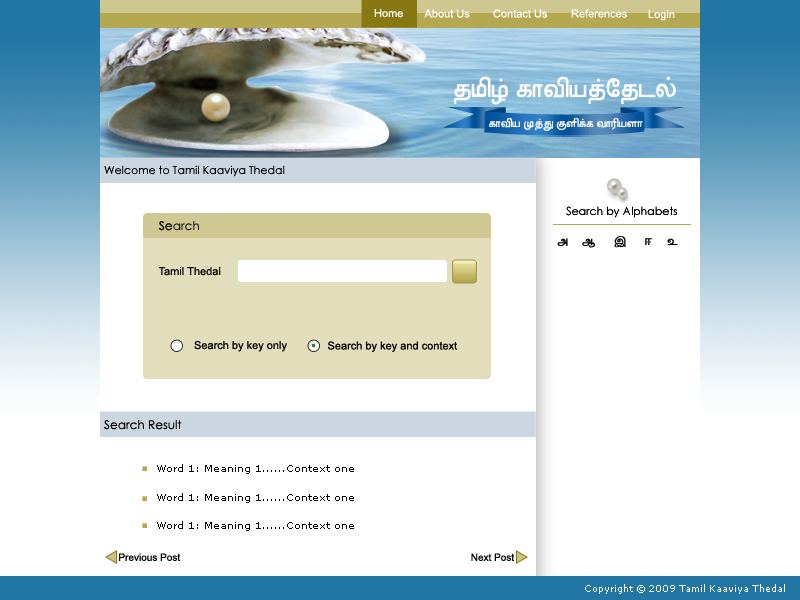
<style>
.page{position:relative;width:800px;height:600px;background:#ffffff}
.page>*{position:absolute;margin:0}
.t1{font:11px "ArialMT";color:#ffffff}
.t2{font:27px "MylaiPlain";color:#ffffff}
.t3{font:30px "MylaiPlain";color:#ffffff}
.t4{font:12px "MylaiPlain";color:#ffffff}
.t5{font:11px "CenturyGothic";color:#050505}
.t6{font:11px "CenturyGothic";color:#000000}
.t7{font:12px "CenturyGothic";color:#222222}
.t8{font:14px "MylaiPlain";color:#000000}
.t9{font:14px "MylaiPlain"}
.t10{font:11px "ArialMT";color:#000000}
.t11{font:12px "CenturyGothic";color:#000000}
.t12{font:10px "Verdana";color:#040404}
.t13{font:10px "ArialMT";color:#000000}
.t14{font:9px "Verdana";color:#ffffff}
</style>
<div class="page">
<p class="t1" style="left:374px;top:9px;width:29px;height:9px">Home</p>
<p class="t1" style="left:424px;top:9px;width:46px;height:9px">About Us</p>
<p class="t1" style="left:493px;top:9px;width:54px;height:9px">Contact Us</p>
<p class="t1" style="left:571px;top:9px;width:56px;height:9px">References</p>
<p class="t1" style="left:648px;top:10px;width:27px;height:11px">Login</p>
<p class="t2" style="left:454px;top:76px;width:222px;height:29px">tmizf kaviytfEtdl<span class="t3">f</span></p>
<p class="t4" style="left:489px;top:118px;width:154px;height:13px">kaviy MtfT Kqikfk variyqa</p>
<p class="t5" style="left:104px;top:165px;width:181px;height:12px">Welcome to Tamil Kaaviya Thedal</p>
<p class="t6" style="left:566px;top:206px;width:111px;height:12px">Search by Alphabets</p>
<p class="t7" style="left:159px;top:221px;width:40px;height:10px">Search</p>
<p class="t8" style="left:557px;top:238px;width:11px;height:8px">`</p>
<p class="t8" style="left:582px;top:238px;width:13px;height:10px">~</p>
<p class="t8" style="left:614px;top:236px;width:12px;height:12px">;</p>
<p class="t9" style="left:645px;top:238px;width:7px;height:7px">:</p>
<p class="t8" style="left:667px;top:238px;width:11px;height:7px">u</p>
<p class="t10" style="left:158px;top:267px;width:63px;height:9px">Tamil Thedal</p>
<p class="t10" style="left:194px;top:340px;width:93px;height:12px">Search by key only</p>
<p class="t10" style="left:328px;top:341px;width:130px;height:11px">Search by key and context</p>
<p class="t11" style="left:104px;top:420px;width:78px;height:10px">Search Result</p>
<p class="t12" style="left:157px;top:464px;width:197px;height:10px">Word 1: Meaning 1......Context one</p>
<p class="t12" style="left:157px;top:493px;width:197px;height:10px">Word 1: Meaning 1......Context one</p>
<p class="t12" style="left:157px;top:521px;width:197px;height:10px">Word 1: Meaning 1......Context one</p>
<p class="t13" style="left:119px;top:553px;width:62px;height:8px">Previous Post</p>
<p class="t13" style="left:471px;top:553px;width:44px;height:8px">Next Post</p>
<p class="t14" style="left:585px;top:584px;width:200px;height:10px">Copyright © 2009 Tamil Kaaviya Thedal</p>
</div>
